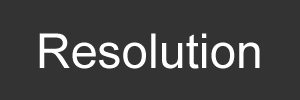
<style>
.page{position:relative;width:300px;height:100px;background:#333333}
.page>*{position:absolute;margin:0}
.t1{font:48px "ArialMT";color:#ffffff}
</style>
<div class="page">
<p class="t1" style="left:39px;top:33px;width:221px;height:36px">Resolution</p>
</div>
